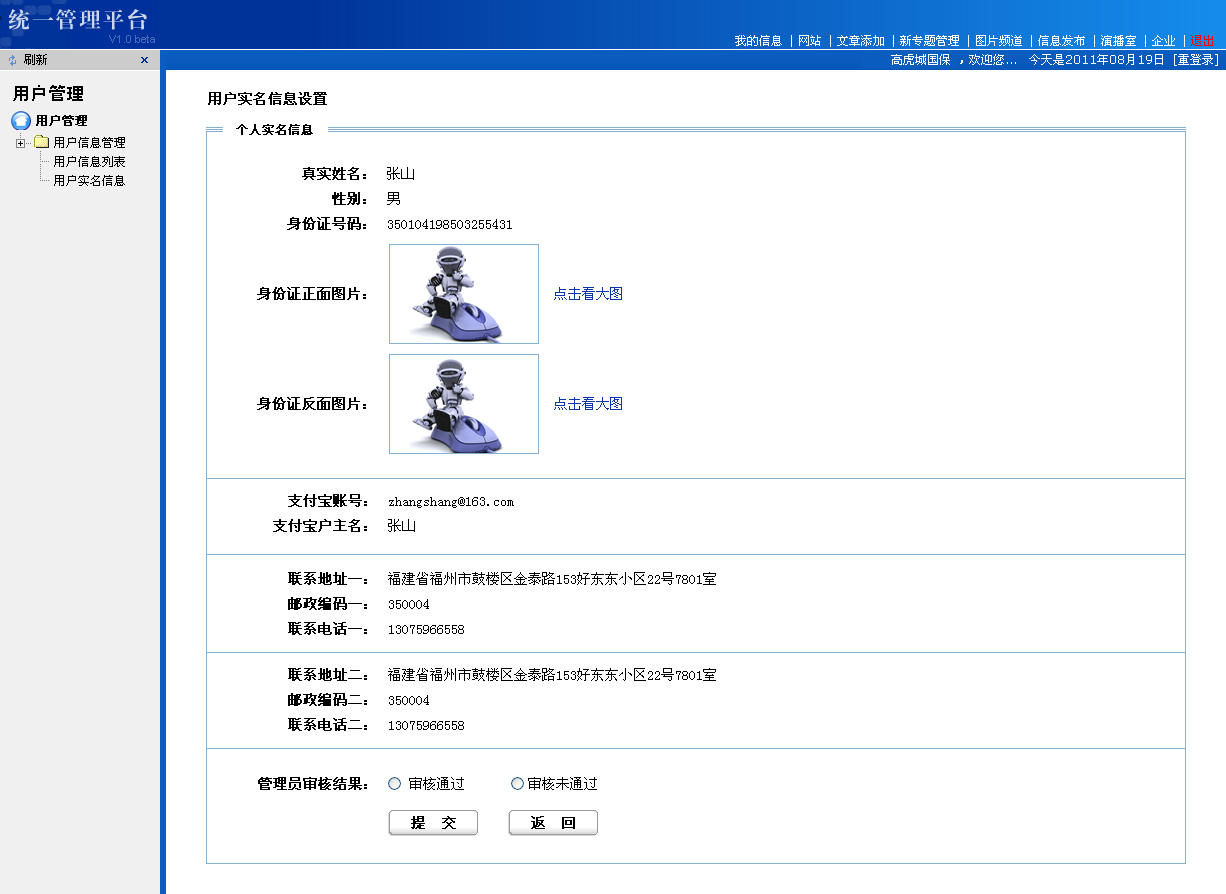
<style>
.page{position:relative;width:1226px;height:894px;background:#ffffff}
.page>*{position:absolute;margin:0}
.t1{font:12px "SimSun";color:#ffffff}
.t2{font:18px "SimHei";color:#000000}
.t3{font:14px "SimSun";color:#000000;font-weight:bold}
.t4{font:12px "SimSun";color:#000000;font-weight:bold}
.t5{font:12px "SimSun";color:#000000}
.t6{font:14px/25px "SimSun";color:#000000;font-weight:bold}
.t7{font:14px/25px "SimSun";color:#000000}
.t8{font:14px/110px "SimSun";color:#000000;font-weight:bold}
.t9{font:14px/110px "SimSun";color:#0937ab}
.t10{font:14px/31px "SimSun";color:#000000}
.t11{font:14px "SimSun";color:#000000}
</style>
<div class="page">
<p class="t1" style="left:891px;top:54px;width:59px;height:11px">高虎城国保</p>
<p class="t2" style="left:13px;top:85px;width:70px;height:16px">用户管理</p>
<p class="t3" style="left:208px;top:92px;width:119px;height:13px">用户实名信息设置</p>
<p class="t4" style="left:36px;top:115px;width:51px;height:11px">用户管理</p>
<p class="t4" style="left:236px;top:124px;width:77px;height:11px">个人实名信息</p>
<p class="t5" style="left:54px;top:137px;width:71px;height:11px">用户信息管理</p>
<p class="t5" style="left:54px;top:156px;width:71px;height:11px">用户信息列表</p>
<p class="t6" style="left:287px;top:167px;width:79px;height:63px;text-align:right">真实姓名：<br>性别：<br>身份证号码：</p>
<p class="t7" style="left:387px;top:167px;width:125px;height:62px">张山<br>男<br>350104198503255431</p>
<p class="t5" style="left:54px;top:175px;width:71px;height:11px">用户实名信息</p>
<p class="t8" style="left:257px;top:287px;width:109px;height:123px;text-align:right">身份证正面图片：<br>身份证反面图片：</p>
<p class="t9" style="left:554px;top:287px;width:68px;height:123px;text-align:right">点击看大图<br>点击看大图</p>
<p class="t6" style="left:273px;top:494px;width:94px;height:38px;text-align:right">支付宝账号：<br>支付宝户主名：</p>
<p class="t7" style="left:388px;top:497px;width:126px;height:35px">zhangshang@163.com<br>张山</p>
<p class="t6" style="left:288px;top:572px;width:79px;height:63px;text-align:right">联系地址一：<br>邮政编码一：<br>联系电话一：</p>
<p class="t10" style="left:388px;top:572px;width:328px;height:62px">福建省福州市鼓楼区金泰路153好东东小区22号7801室  <br><span class="t7">350004<br>13075966558</span></p>
<p class="t6" style="left:288px;top:668px;width:79px;height:63px;text-align:right">联系地址二：<br>邮政编码二：<br>联系电话二：</p>
<p class="t10" style="left:388px;top:668px;width:328px;height:62px">福建省福州市鼓楼区金泰路153好东东小区22号7801室  <br><span class="t7">350004<br>13075966558</span></p>
<p class="t3" style="left:258px;top:777px;width:109px;height:13px">管理员审核结果：</p>
<p class="t11" style="left:409px;top:777px;width:188px;height:13px">审核通过         审核未通过</p>
<p class="t3" style="left:411px;top:816px;width:45px;height:13px">提  交</p>
<p class="t3" style="left:531px;top:816px;width:44px;height:13px">返  回</p>
</div>
